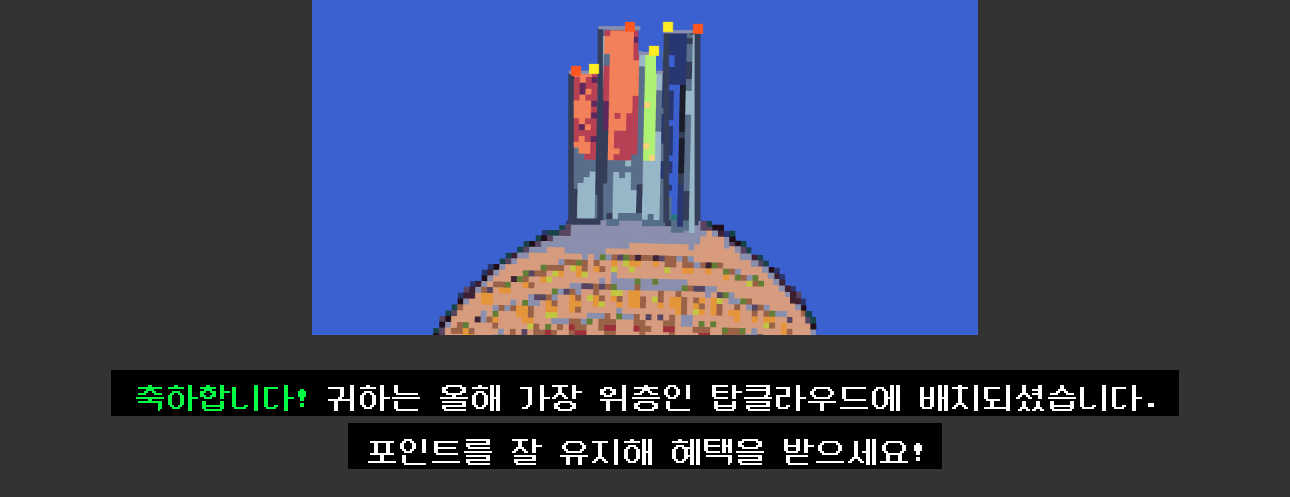
<style>
.page{position:relative;width:1290px;height:497px;background:#333333}
.page>*{position:absolute;margin:0}
.t1{font:32px/26.7px "DungGeunMo";color:#ffffff}
.t2{font:32px/26.7px "DungGeunMo";color:#00ff42}
</style>
<div class="page">
<p class="t1" style="left:136px;top:385px;width:1018px;height:80px;text-align:center"><span class="t2">축하합니다!</span> 귀하는 올해 가장 위층인 탑클라우드에 배치되셨습니다.<br><br> 포인트를 잘 유지해 혜택을 받으세요!</p>
</div>
